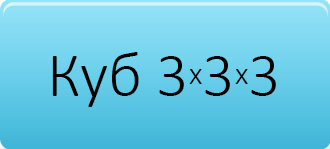
<style>
.page{position:relative;width:330px;height:149px}
.page>*{position:absolute;margin:0}
.t1{font:64px "Calibri-Light";color:#000000}
.t2{font:32px "Calibri-Light";color:#000000}
</style>
<div class="page">
<p class="t1" style="left:52px;top:52px;width:224px;height:55px">Куб 3<span class="t2">x</span>3<span class="t2">x</span>3</p>
</div>
